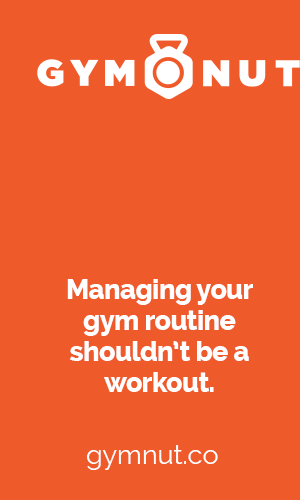
<style>
.page{position:relative;width:300px;height:500px;background:#ef5a2a}
.page>*{position:absolute;margin:0}
.t1{font:27px/31px "Raleway-ExtraBold";letter-spacing:-0.02em;color:#ffffff}
.t2{font:27px "Raleway";color:#ffffff}
</style>
<div class="page">
<p class="t1" style="left:67px;top:279px;width:186px;height:113px;text-align:center">Managing your gym routine shouldn’t be a workout.</p>
<p class="t2" style="left:87px;top:445px;width:131px;height:25px">gymnut.co</p>
</div>
